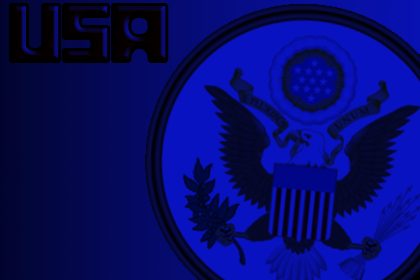
<style>
.page{position:relative;width:420px;height:280px;background:#0912c0}
.page>*{position:absolute;margin:0}
.t1{font:48px "DSProgress-SemiBold";letter-spacing:0.1em}
</style>
<div class="page">
<p class="t1" style="left:12px;top:6px;width:154px;height:54px">usa</p>
</div>
